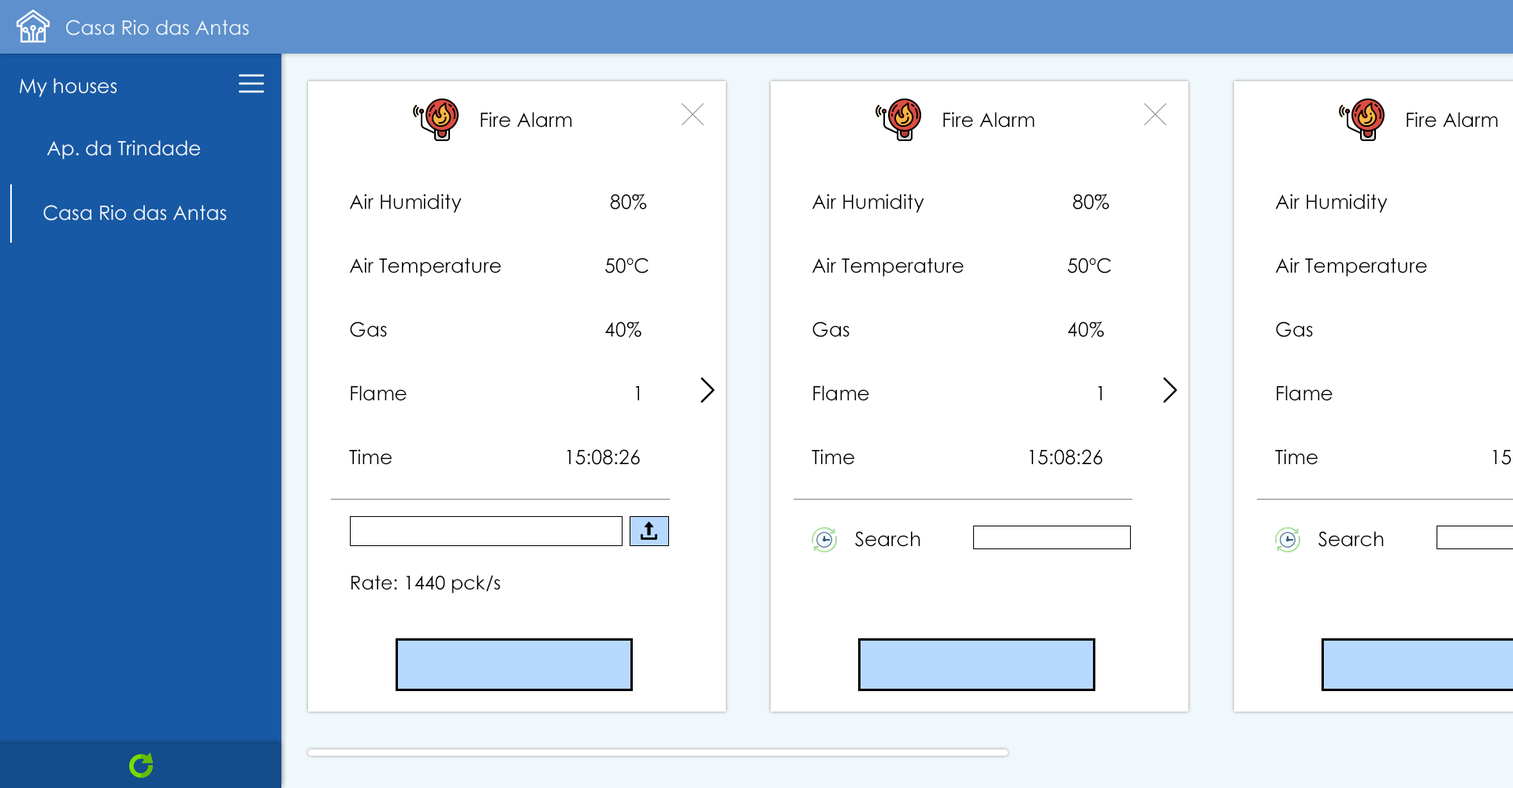
<style>
.page{position:relative;width:1513px;height:788px;background:#ffffff}
.page>*{position:absolute;margin:0}
.t1{font:19.7px "CenturyGothic";color:#f0f7fb}
.t2{font:19.7px "CenturyGothic";color:#000101}
.t3{font:19.7px/63px "CenturyGothic";color:#000000}
.t4{font:19.7px "CenturyGothic";color:#000000}
.t5{font:18.9px "CenturyGothic";color:#000000}
</style>
<div class="page">
<p class="t1" style="left:66px;top:20px;width:183px;height:15px">Casa Rio das Antas</p>
<p class="t1" style="left:20px;top:78px;width:97px;height:19px">My houses</p>
<p class="t2" style="left:481px;top:112px;width:91px;height:16px">Fire Alarm</p>
<p class="t2" style="left:943px;top:112px;width:92px;height:16px">Fire Alarm</p>
<p class="t2" style="left:1407px;top:112px;width:91px;height:16px">Fire Alarm</p>
<p class="t1" style="left:46px;top:140px;width:154px;height:19px">Ap. da Trindade</p>
<p class="t3" style="left:349px;top:194px;width:300px;height:271px">Air Humidity       80%<br>Air Temperature    50ºC<br>Gas        40%<br>Flame        1<br>Time         15:08:26</p>
<p class="t3" style="left:812px;top:194px;width:299px;height:271px">Air Humidity       80%<br>Air Temperature    50ºC<br>Gas        40%<br>Flame        1<br>Time         15:08:26</p>
<p class="t1" style="left:43px;top:205px;width:183px;height:16px">Casa Rio das Antas</p>
<p class="t4" style="left:855px;top:531px;width:65px;height:16px">Search</p>
<p class="t4" style="left:1318px;top:531px;width:66px;height:16px">Search</p>
<p class="t5" style="left:351px;top:575px;width:149px;height:18px">Rate: 1440 pck/s</p>
</div>
